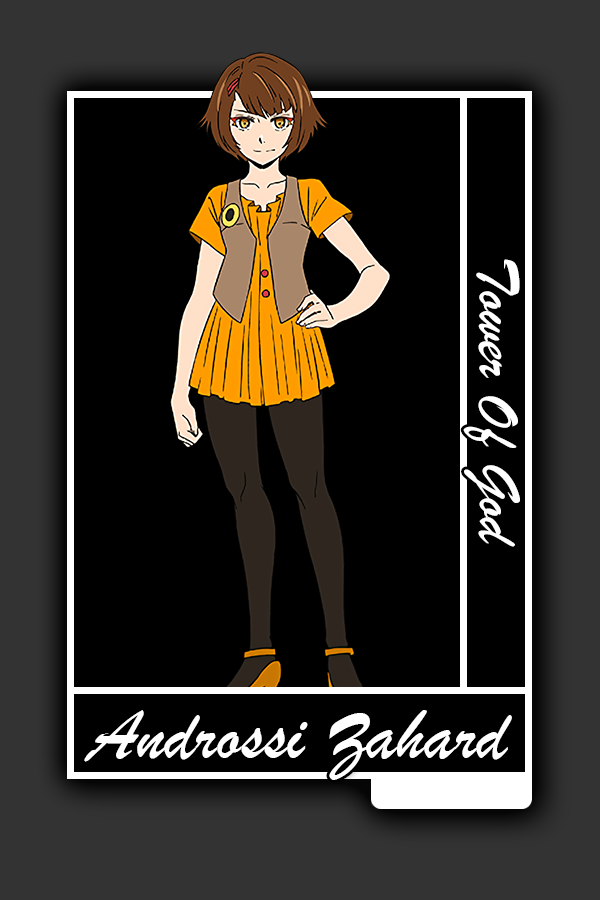
<style>
.page{position:relative;width:600px;height:900px;background:#000000}
.page>*{position:absolute;margin:0}
.t1{font:61.5px "BrushScriptMT";color:#ffffff}
.t2{font:75px "BrushScriptMT";color:#ffffff}
</style>
<div class="page">
<p class="t1" style="left:463px;top:259px;width:57px;height:288px;rotate:90deg">Tower Of God</p>
<p class="t2" style="left:84px;top:710px;width:428px;height:70px">Androssi Zahard</p>
</div>
